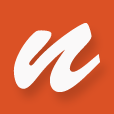
<style>
.page{position:relative;width:114px;height:114px;background:#db5125}
.page>*{position:absolute;margin:0}
.t1{font:175.8px "BrushScriptStd";color:#faf9f9}
</style>
<div class="page">
<p class="t1" style="left:13px;top:23px;width:87px;height:69px">n</p>
</div>
